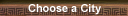
<style>
.page{position:relative;width:128px;height:16px}
.page>*{position:absolute;margin:0}
.t1{font:11px "Arial-BoldMT";color:#ffffff}
</style>
<div class="page">
<p class="t1" style="left:28px;top:4px;width:73px;height:11px">Choose a City</p>
</div>
